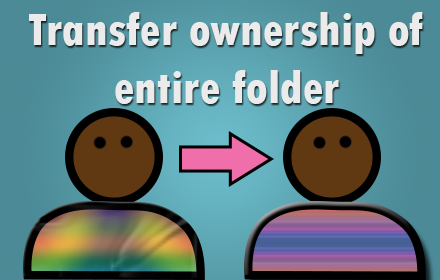
<style>
.page{position:relative;width:440px;height:280px}
.page>*{position:absolute;margin:0}
.t1{font:48px "TwCenMT-CondensedExtraBold";color:#ebebeb}
</style>
<div class="page">
<p class="t1" style="left:29px;top:12px;width:394px;height:92px;text-align:center">Transfer ownership of<br>entire folder</p>
</div>
